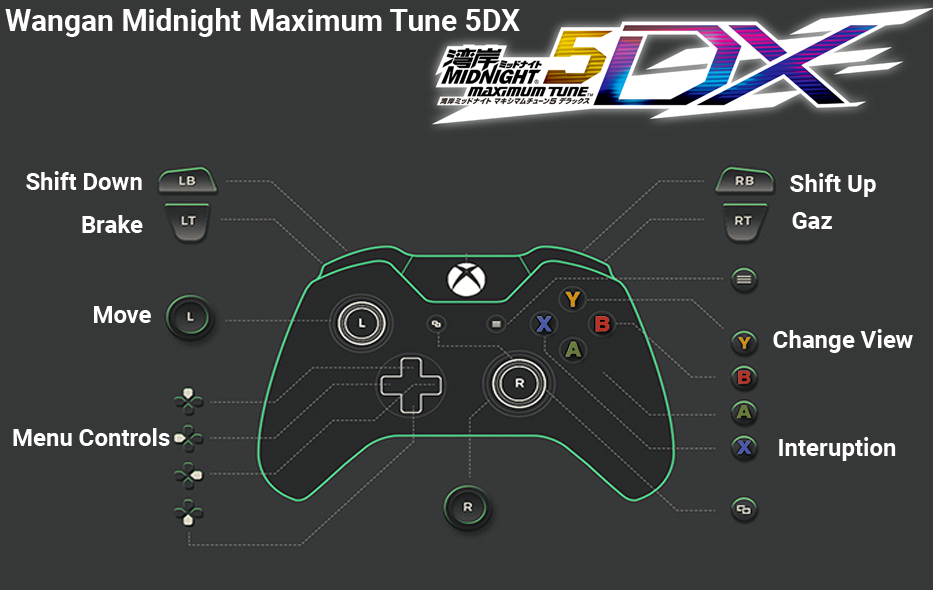
<style>
.page{position:relative;width:933px;height:590px;background:#363838}
.page>*{position:absolute;margin:0}
.t1{font:30px "Roboto-Bold";color:#ffffff}
.t2{font:24px "Roboto-Bold";color:#ffffff}
</style>
<div class="page">
<p class="t1" style="left:5px;top:8px;width:515px;height:29px">Wangan Midnight Maximum Tune 5DX</p>
<p class="t2" style="left:26px;top:171px;width:116px;height:19px">Shift Down</p>
<p class="t2" style="left:790px;top:173px;width:86px;height:24px">Shift Up</p>
<p class="t2" style="left:82px;top:215px;width:61px;height:18px">Brake</p>
<p class="t2" style="left:792px;top:212px;width:40px;height:17px">Gaz</p>
<p class="t2" style="left:94px;top:306px;width:57px;height:17px">Move</p>
<p class="t2" style="left:773px;top:329px;width:140px;height:24px">Change View</p>
<p class="t2" style="left:13px;top:428px;width:157px;height:18px">Menu Controls</p>
<p class="t2" style="left:779px;top:437px;width:117px;height:24px">Interuption</p>
</div>
